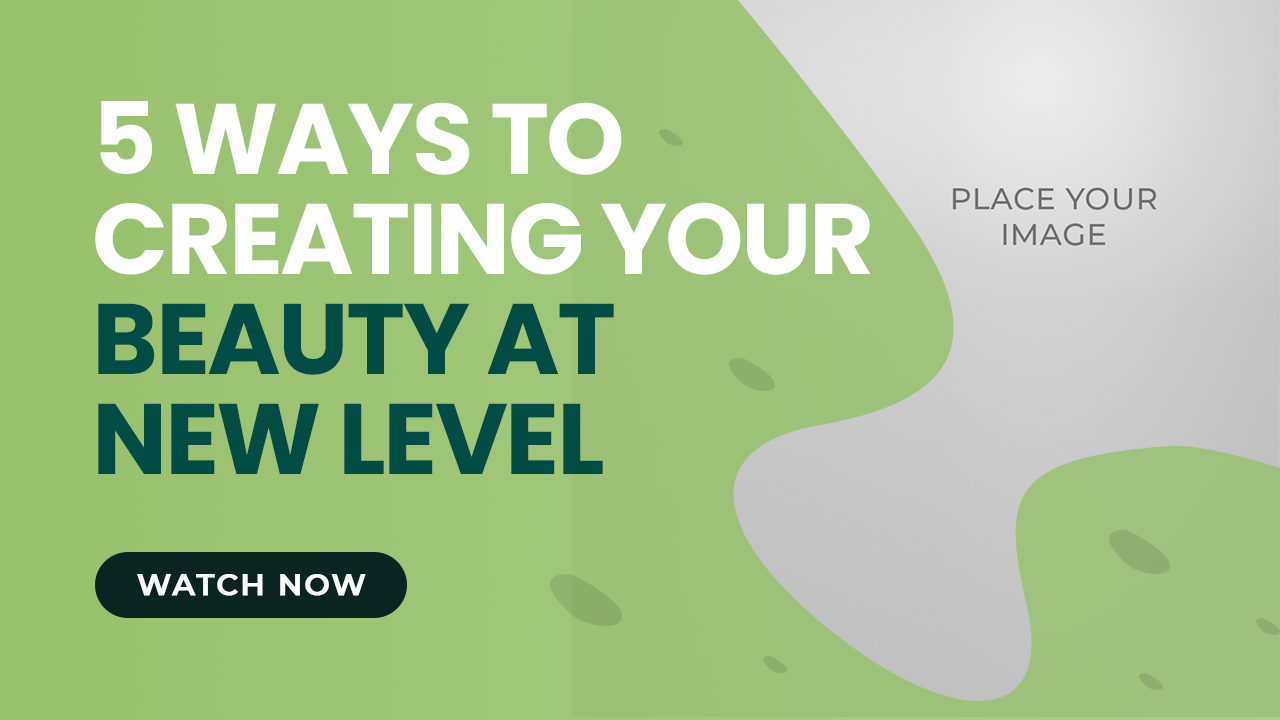
<style>
.page{position:relative;width:1280px;height:720px}
.page>*{position:absolute;margin:0}
.t1{font:100px/100px "Poppins-Bold";letter-spacing:-0.025em;color:#ffffff;text-transform:uppercase}
.t2{font:100px/100px "Poppins-Bold";letter-spacing:-0.025em;color:#014c45;text-transform:uppercase}
.t3{font:30px "Montserrat-SemiBold";letter-spacing:0.05em;color:#ffffff;text-transform:uppercase;font-weight:bold}
</style>
<div class="page">
<p class="t1" style="left:95px;top:101px;width:776px;height:373px">5 Ways to<br>creating your<br><span class="t2">beauty at<br>new level</span></p>
<p class="t3" style="left:137px;top:574px;width:229px;height:22px">watch now</p>
</div>
